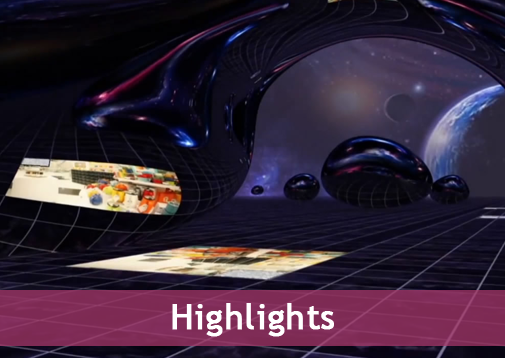
<style>
.page{position:relative;width:505px;height:358px}
.page>*{position:absolute;margin:0}
.t1{font:35.3px "TrebuchetMS";color:#ffffff;font-weight:bold}
</style>
<div class="page">
<p class="t1" style="left:172px;top:303px;width:162px;height:34px">Highlights</p>
</div>
